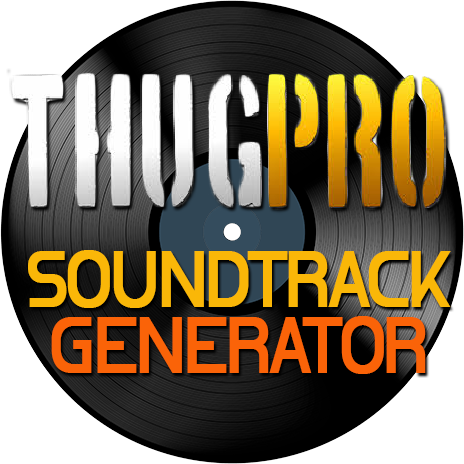
<style>
.page{position:relative;width:464px;height:464px;background:#ffffff}
.page>*{position:absolute;margin:0}
.t1{font:76px/66px "NidusSans";letter-spacing:-0.04em;color:#fab708}
.t2{font:76px/66px "NidusSans";letter-spacing:-0.04em;color:#fa6308}
</style>
<div class="page">
<p class="t1" style="left:28px;top:250px;width:423px;height:124px;text-align:center">SOUNDTRACK<br><span class="t2">GENERATOR</span></p>
</div>
